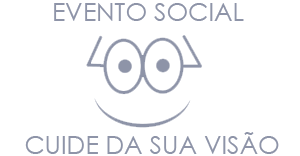
<style>
.page{position:relative;width:300px;height:156px;background:#ffffff}
.page>*{position:absolute;margin:0}
.t1{font:25px "CenturyGothic";color:#8e94a8}
</style>
<div class="page">
<p class="t1" style="left:54px;top:3px;width:190px;height:18px">EVENTO SOCIAL</p>
<p class="t1" style="left:25px;top:132px;width:254px;height:22px">CUIDE DA SUA VISÃO</p>
</div>
